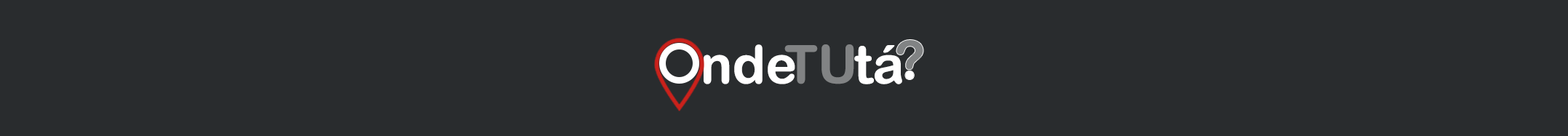
<style>
.page{position:relative;width:1568px;height:136px;background:#292c2e}
.page>*{position:absolute;margin:0}
.t1{font:52.4px "ArialRoundedMTBold";letter-spacing:-0.02em;color:#ffffff;font-weight:bold}
.t2{font:52.4px "ArialRoundedMTBold";letter-spacing:-0.02em;color:#818384;font-weight:bold}
</style>
<div class="page">
<p class="t1" style="left:704px;top:44px;width:91px;height:40px">nde</p>
<p class="t2" style="left:784px;top:44px;width:70px;height:40px">TU</p>
<p class="t1" style="left:854px;top:45px;width:48px;height:39px">tá</p>
</div>
